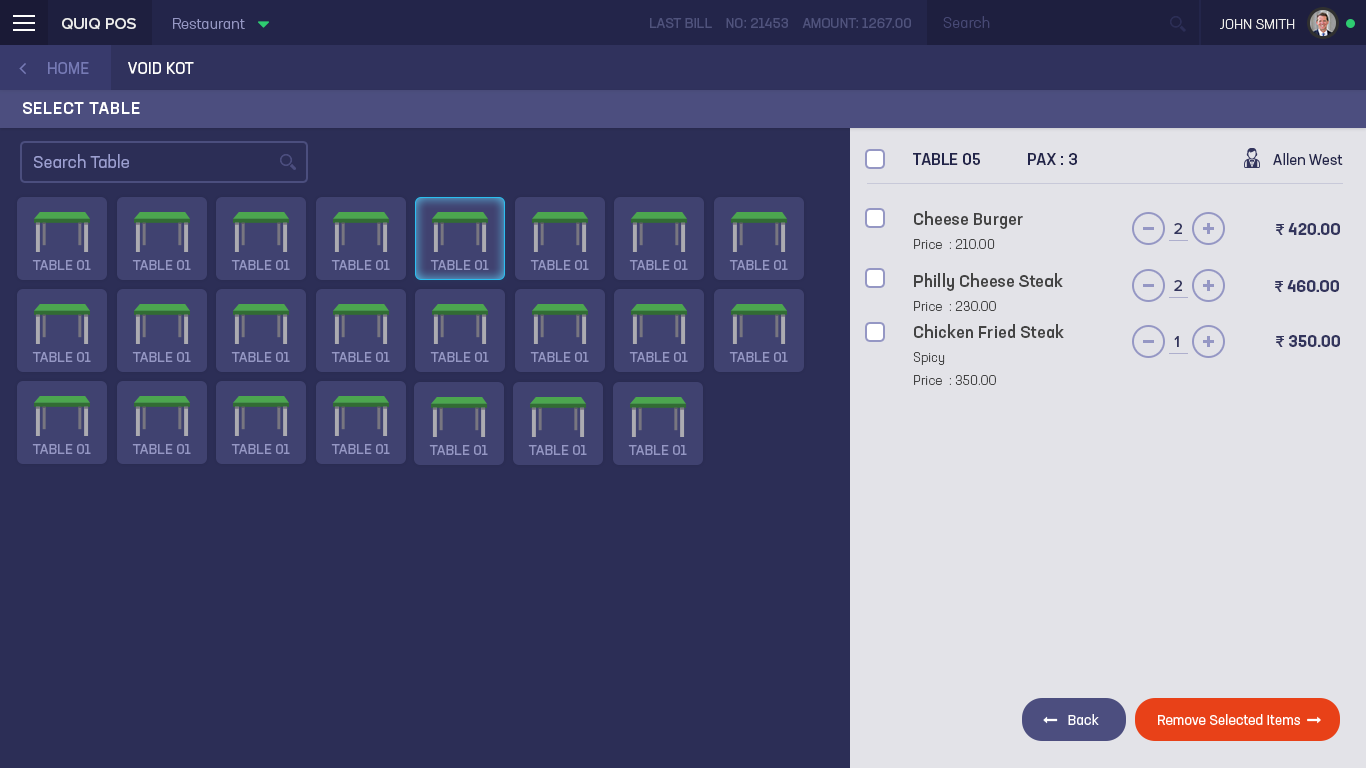
<style>
.page{position:relative;width:1366px;height:768px;background:#2c2e56}
.page>*{position:absolute;margin:0}
.t1{font:15px "NeusaNextStd-Light";color:#474975}
.t2{font:16px "ProximaNova-Medium";color:#ededed}
.t3{font:15px "NeusaNextStd-Light";color:#9597c4}
.t4{font:14px "NeusaNextStd-Regular";color:#50537d;text-transform:uppercase}
.t5{font:14px "NeusaNextStd-Light";color:#ededed;text-transform:uppercase}
.t6{font:16px "NeusaNextStd-Regular";color:#767ab5;text-transform:uppercase}
.t7{font:16px "NeusaNextStd-Regular";color:#ffffff;text-transform:uppercase}
.t8{font:17px "NeusaNextStd-Medium";letter-spacing:0.04em;color:#ffffff;text-transform:uppercase}
.t9{font:17px "NeusaNextStd-Regular";color:#9c9fd1}
.t10{font:16px "NeusaNextStd-Medium";color:#23254a;text-transform:uppercase}
.t11{font:15px "NeusaNextStd-Regular";color:#23254a}
.t12{font:17px "NeusaNextStd-Medium";color:#444444}
.t13{font:16px "ProximaNova-Medium";color:#33355d}
.t14{font:16px "NeusaNextStd-Bold";color:#33355d}
.t15{font:16px "ProximaNova-Semibold";color:#33355d}
.t16{font:13px "NeusaNextStd-Light";color:#444444}
</style>
<div class="page">
<p class="t1" style="left:943px;top:16px;width:47px;height:12px">Search</p>
<p class="t2" style="left:62px;top:18px;width:74px;height:12px">QUIQ POS</p>
<p class="t3" style="left:173px;top:18px;width:72px;height:11px">Restaurant</p>
<p class="t4" style="left:650px;top:18px;width:261px;height:10px">Last Bill    NO: 21453    Amount: 1267.00</p>
<p class="t5" style="left:1220px;top:19px;width:75px;height:10px">John Smith</p>
<p class="t6" style="left:48px;top:62px;width:41px;height:12px">Home</p>
<p class="t7" style="left:128px;top:62px;width:66px;height:12px">Void Kot</p>
<p class="t8" style="left:23px;top:102px;width:117px;height:12px">Select Table</p>
<p class="t9" style="left:34px;top:154px;width:95px;height:14px">Search Table</p>
<p class="t10" style="left:913px;top:153px;width:67px;height:12px">Table 05</p>
<p class="t10" style="left:1028px;top:153px;width:49px;height:12px">PAX : 3</p>
<p class="t11" style="left:1273px;top:153px;width:70px;height:12px">Allen West</p>
<p class="t12" style="left:914px;top:211px;width:109px;height:18px">Cheese Burger</p>
<p class="t13" style="left:1174px;top:223px;width:8px;height:11px">2</p>
<p class="t14" style="left:1276px;top:223px;width:64px;height:12px"><span class="t15">₹</span> 420.00</p>
<p class="t16" style="left:914px;top:239px;width:81px;height:10px">Price : 210.00</p>
<p class="t12" style="left:914px;top:273px;width:149px;height:18px">Philly Cheese Steak</p>
<p class="t13" style="left:1174px;top:280px;width:8px;height:11px">2</p>
<p class="t14" style="left:1275px;top:280px;width:64px;height:12px"><span class="t15">₹</span> 460.00</p>
<p class="t16" style="left:914px;top:301px;width:82px;height:10px">Price : 230.00</p>
<p class="t12" style="left:914px;top:324px;width:150px;height:14px">Chicken Fried Steak</p>
<p class="t13" style="left:1174px;top:336px;width:5px;height:11px">1</p>
<p class="t14" style="left:1276px;top:335px;width:64px;height:12px"><span class="t15">₹</span> 350.00</p>
<p class="t16" style="left:913px;top:352px;width:32px;height:13px">Spicy</p>
<p class="t16" style="left:914px;top:375px;width:82px;height:10px">Price : 350.00</p>
</div>
